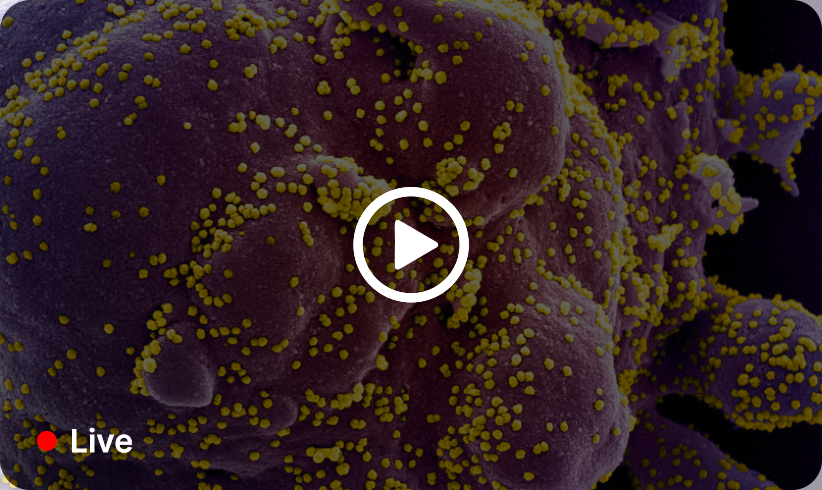
<style>
.page{position:relative;width:822px;height:490px}
.page>*{position:absolute;margin:0}
.t1{font:32px "Inter-SemiBold";color:#ffffff}
</style>
<div class="page">
<p class="t1" style="left:72px;top:427px;width:60px;height:26px">Live</p>
<p class="t1" style="left:72px;top:427px;width:60px;height:26px">Live</p>
</div>
